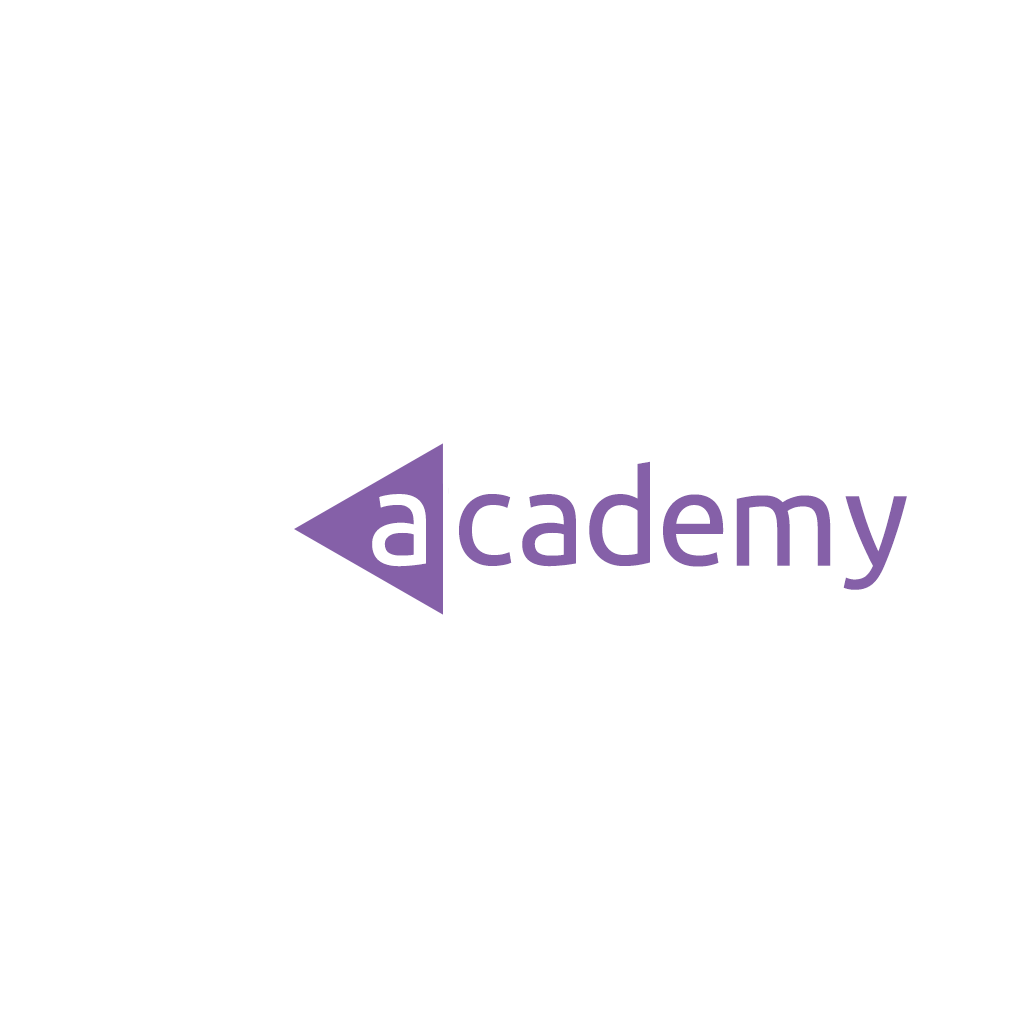
<style>
.page{position:relative;width:1024px;height:1024px;background:#ffffff}
.page>*{position:absolute;margin:0}
.t1{font:132px "Ubuntu";color:#8560a8}
.t2{font:132px "Ubuntu";color:#ffffff}
</style>
<div class="page">
<p class="t1" style="left:589px;top:461px;width:61px;height:105px">d</p>
<p class="t2" style="left:372px;top:494px;width:54px;height:73px">a</p>
<p class="t1" style="left:459px;top:494px;width:53px;height:72px">c</p>
<p class="t1" style="left:522px;top:494px;width:54px;height:73px">a</p>
<p class="t1" style="left:663px;top:494px;width:61px;height:73px">e</p>
<p class="t1" style="left:736px;top:495px;width:95px;height:71px">m</p>
<p class="t1" style="left:843px;top:496px;width:64px;height:94px">y</p>
</div>
